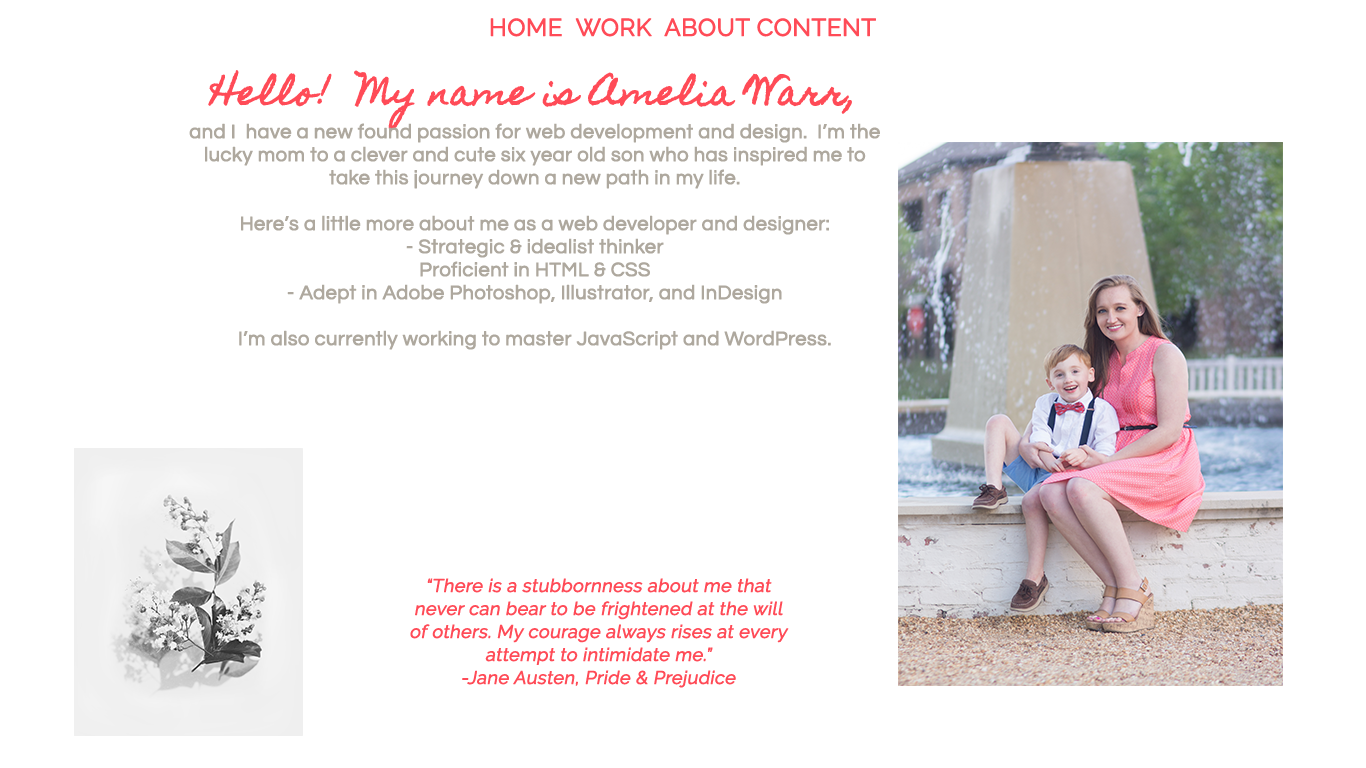
<style>
.page{position:relative;width:1366px;height:768px;background:#ffffff}
.page>*{position:absolute;margin:0}
.t1{font:24px "Raleway-Regular";color:#ff4b57;text-transform:uppercase;font-weight:bold}
.t2{font:20px/23px "Questrial-Regular";color:#aea89e;font-weight:bold}
.t3{font:34px/34px "HomemadeApple-Regular";color:#ff4b57;font-weight:bold}
.t4{font:20px/34px "Questrial-Regular";color:#aea89e;font-weight:bold}
.t5{font:18px/23px "Raleway-Regular";color:#ff4b57;font-weight:bold;font-style:italic}
</style>
<div class="page">
<p class="t1" style="left:490px;top:18px;width:386px;height:19px">HOME  WORK  ABOUT CONTENT</p>
<p class="t2" style="left:189px;top:70px;width:691px;height:280px;text-align:center"><span class="t3">Hello!  My name is Amelia Warr,<br></span><span class="t4">and I  have a new found passion for web development and design. </span> I’m the lucky mom to a clever and cute six year old son who has inspired me to take this journey down a new path in my life. <br><br>Here’s a little more about me as a web developer and designer:<br>- Strategic &amp; idealist thinker<br>Proficient in HTML &amp; CSS<br>- Adept in Adobe Photoshop, Illustrator, and InDesign<br><br>I’m also currently working to master JavaScript and WordPress.</p>
<p class="t5" style="left:410px;top:578px;width:379px;height:110px;text-align:center">“There is a stubbornness about me that never can bear to be frightened at the will of others. My courage always rises at every attempt to intimidate me.” <br>-Jane Austen, Pride &amp; Prejudice</p>
</div>
